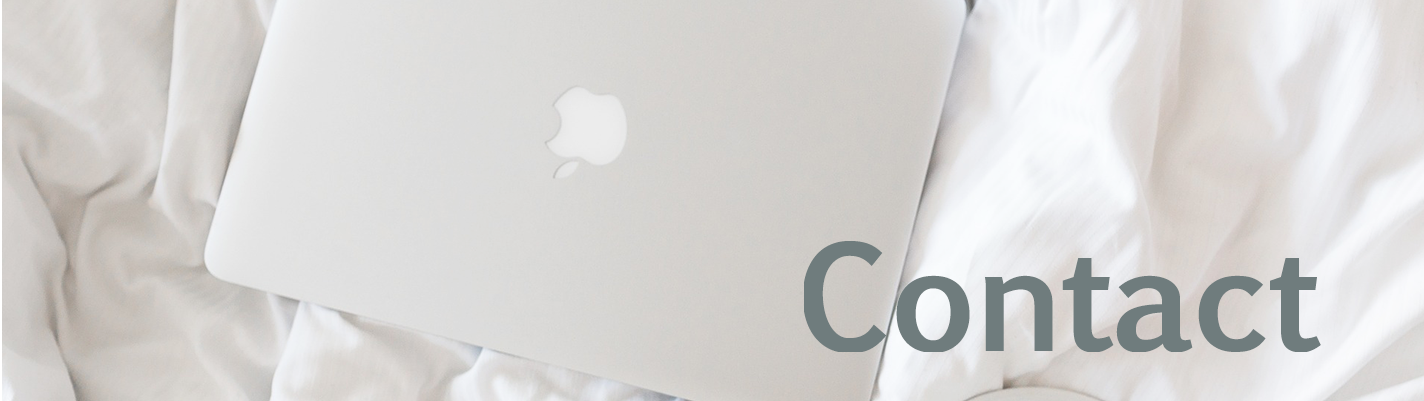
<style>
.page{position:relative;width:1424px;height:401px}
.page>*{position:absolute;margin:0}
.t1{font:140px "EuphemiaUCAS-Bold";letter-spacing:-0.025em;color:#6f7c7d}
</style>
<div class="page">
<p class="t1" style="left:802px;top:241px;width:519px;height:112px">Contact</p>
</div>
